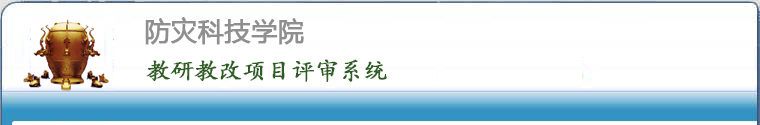
<style>
.page{position:relative;width:760px;height:125px;background:#ffffff}
.page>*{position:absolute;margin:0}
.t1{font:26px "MicrosoftYaHei";color:#8f8f8f;font-weight:bold}
.t2{font:24px "¿¬Ìå";color:#2d5d21;font-weight:bold}
</style>
<div class="page">
<p class="t1" style="left:145px;top:17px;width:159px;height:28px">防灾科技学院</p>
<p class="t2" style="left:146px;top:59px;width:241px;height:23px">教研教改项目评审系统</p>
</div>
